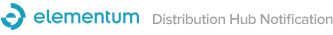
<style>
.page{position:relative;width:333px;height:35px;background:#ffffff}
.page>*{position:absolute;margin:0}
.t1{font:15px "ProximaNova-Semibold";letter-spacing:-0.022em;color:#a6a5a5}
</style>
<div class="page">
<p class="t1" style="left:153px;top:13px;width:180px;height:12px">Distribution Hub Notification</p>
</div>
